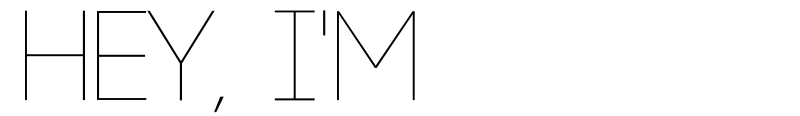
<style>
.page{position:relative;width:800px;height:116px;background:#ffffff}
.page>*{position:absolute;margin:0}
.t1{font:127px "Code-Light";color:#000000}
.t2{font:127px "Code-Bold";color:#ffffff}
</style>
<div class="page">
<p class="t1" style="left:25px;top:9px;width:756px;height:104px">Hey, I'm <span class="t2">Koko</span></p>
</div>
